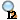
<style>
.page{position:relative;width:20px;height:20px;background:#fcfaf9}
.page>*{position:absolute;margin:0}
.t1{font:11px "BellGothicStd-Bold";letter-spacing:-0.1em;color:#000000;font-weight:bold}
</style>
<div class="page">
<p class="t1" style="left:7px;top:11px;width:10px;height:8px">I2</p>
</div>
